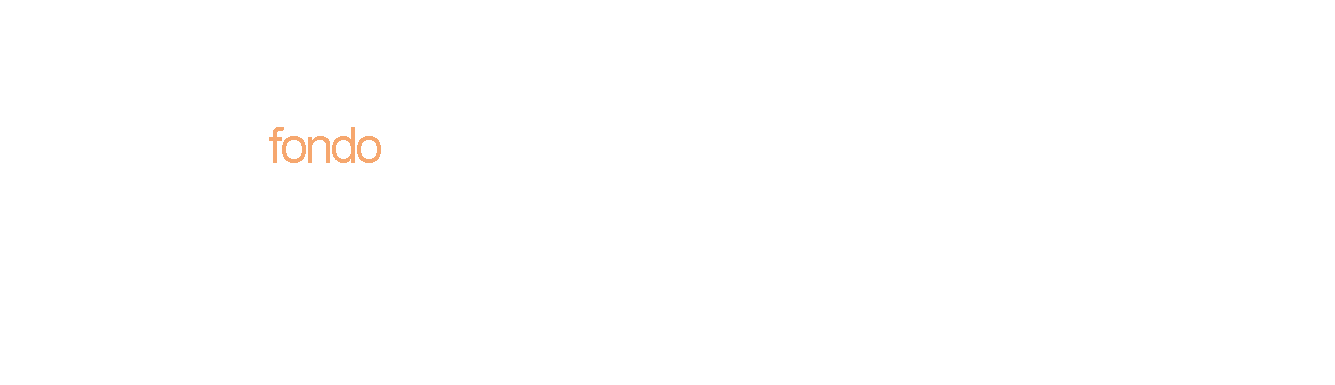
<style>
.page{position:relative;width:1335px;height:385px;background:#ffffff}
.page>*{position:absolute;margin:0}
.t1{font:50.4px "ArialMT";letter-spacing:-0.06em;color:#f6a76e}
</style>
<div class="page">
<p class="t1" style="left:269px;top:127px;width:112px;height:36px">fondo</p>
</div>
